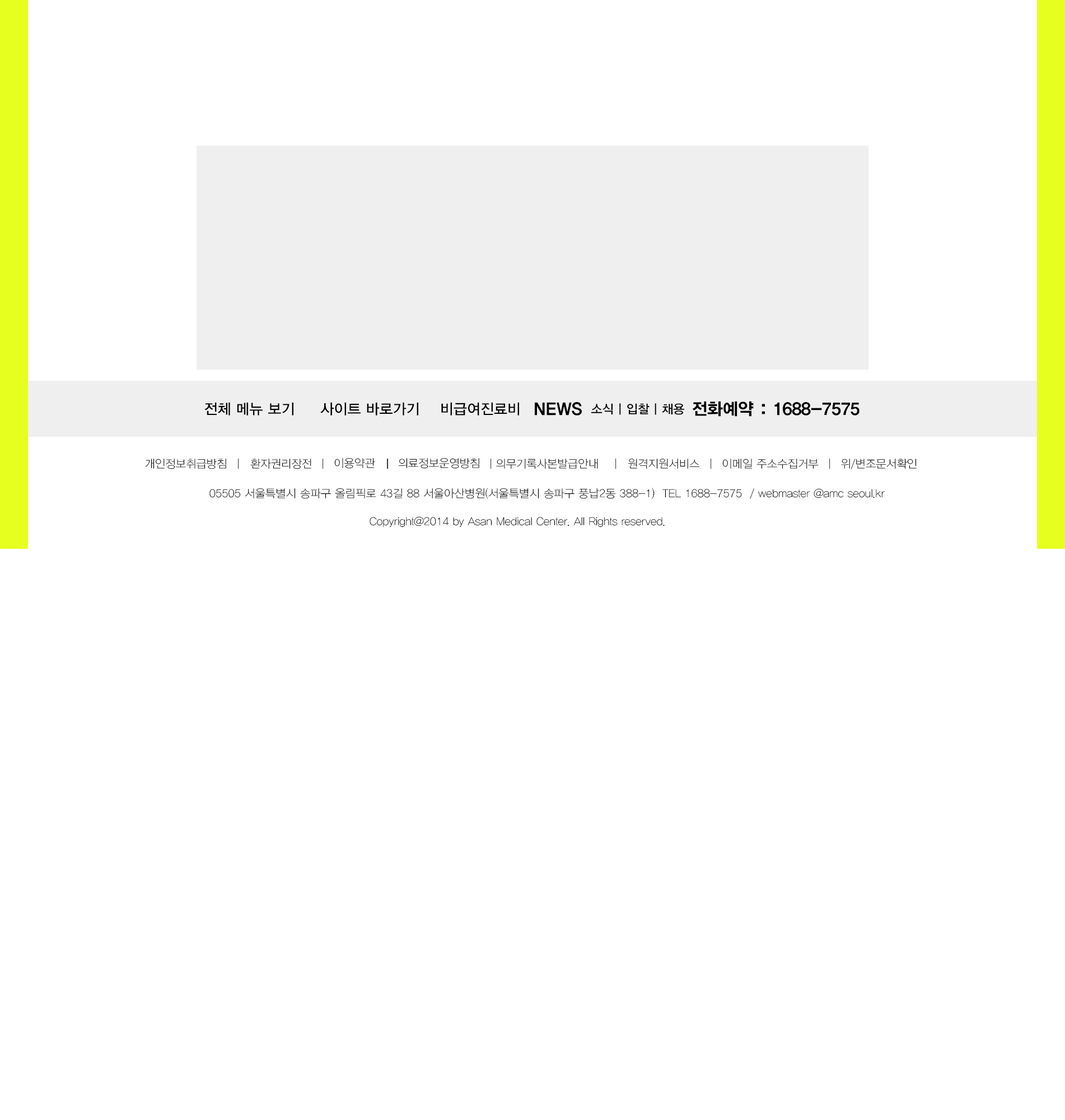
<style>
.page{position:relative;width:1065px;height:1120px;background:#ffffff}
.page>*{position:absolute;margin:0}
.t1{font:14.6px "YDIYGO330";color:#000000}
.t2{font:16.8px "YDIYGO350";color:#000000}
.t3{font:12.3px "YDIYGO330";color:#000000}
.t4{font:11.2px "YDIYGO310";color:#000000}
.t5{font:11.2px "YDIYGO310"}
</style>
<div class="page">
<p class="t1" style="left:204px;top:402px;width:89px;height:13px">전체 메뉴 보기</p>
<p class="t1" style="left:320px;top:402px;width:98px;height:13px">사이트 바로가기</p>
<p class="t1" style="left:441px;top:402px;width:78px;height:13px">비급여진료비</p>
<p class="t2" style="left:535px;top:402px;width:47px;height:13px">NEWS</p>
<p class="t2" style="left:692px;top:401px;width:167px;height:16px">전화예약 : 1688-7575</p>
<p class="t3" style="left:591px;top:403px;width:94px;height:12px">소식 | 입찰 | 채용</p>
<p class="t4" style="left:145px;top:459px;width:81px;height:10px">개인정보취급방침</p>
<p class="t5" style="left:238px;top:458px;width:1px;height:11px">|</p>
<p class="t4" style="left:250px;top:459px;width:61px;height:10px">환자권리장전</p>
<p class="t5" style="left:322px;top:458px;width:2px;height:11px">|</p>
<p class="t4" style="left:334px;top:458px;width:41px;height:11px">이용약관</p>
<p class="t5" style="left:387px;top:458px;width:2px;height:11px">|</p>
<p class="t4" style="left:398px;top:458px;width:81px;height:11px">의료정보운영방침</p>
<p class="t5" style="left:490px;top:458px;width:2px;height:11px">|</p>
<p class="t4" style="left:496px;top:459px;width:102px;height:10px">의무기록사본발급안내</p>
<p class="t5" style="left:615px;top:458px;width:1px;height:11px">|</p>
<p class="t4" style="left:628px;top:459px;width:72px;height:10px">원격지원서비스</p>
<p class="t5" style="left:710px;top:458px;width:2px;height:11px">|</p>
<p class="t4" style="left:722px;top:459px;width:97px;height:10px">이메일 주소수집거부</p>
<p class="t5" style="left:829px;top:458px;width:1px;height:11px">|</p>
<p class="t4" style="left:841px;top:459px;width:76px;height:10px">위/변조문서확인</p>
<p class="t4" style="left:209px;top:488px;width:676px;height:11px">05505 서울특별시 송파구 올림픽로 43길 88 서울아산병원(서울특별시 송파구 풍납2동 388-1)  TEL 1688-7575  / webmaster @amc seoul.kr</p>
<p class="t4" style="left:370px;top:516px;width:295px;height:11px">Copyright@2014 by Asan Medical Center. All Rights reserved.</p>
</div>
